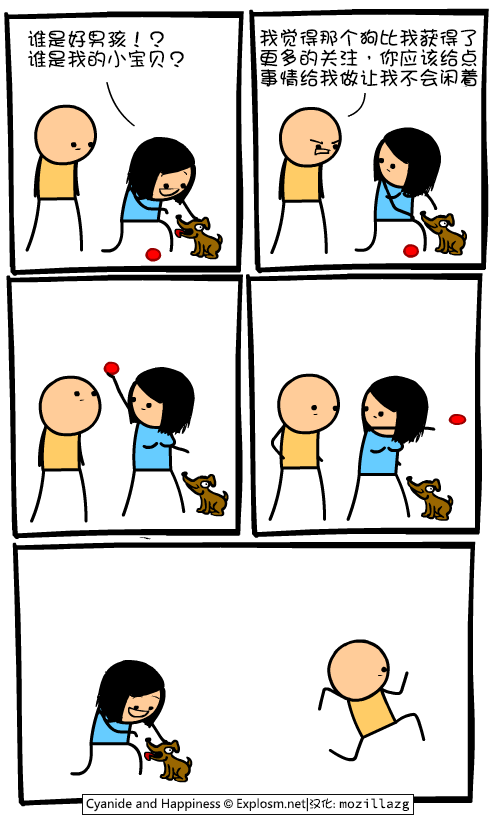
<style>
.page{position:relative;width:500px;height:820px;background:#ffffff}
.page>*{position:absolute;margin:0}
.t1{font:20px/20px "DFGirl";color:#000000}
</style>
<div class="page">
<p class="t1" style="left:28px;top:30px;width:156px;height:38px">谁是好男孩！？<br>谁是我的小宝贝？</p>
<p class="t1" style="left:259px;top:28px;width:219px;height:59px">我觉得那个狗比我获得了<br>更多的关注，你应该给点<br>事情给我做让我不会闲着</p>
</div>
